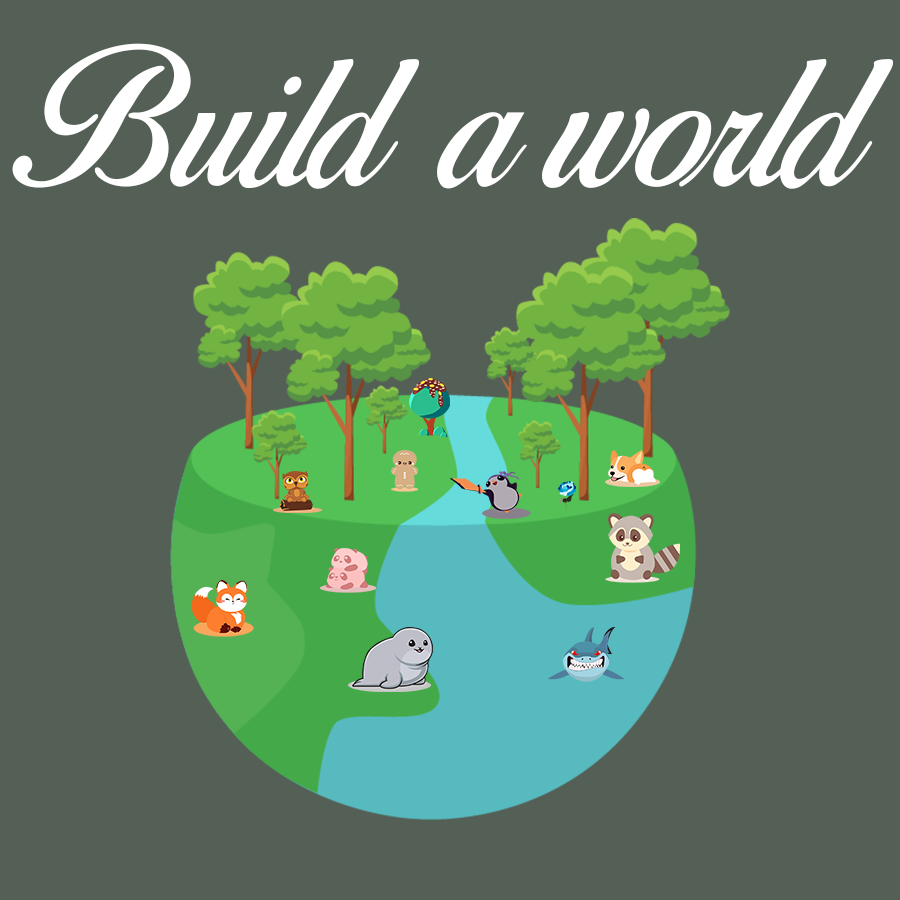
<style>
.page{position:relative;width:900px;height:900px;background:#545f56}
.page>*{position:absolute;margin:0}
.t1{font:169.3px "BirdsofParadise-PersonaluseOnly";color:#ffffff}
</style>
<div class="page">
<p class="t1" style="left:12px;top:43px;width:881px;height:146px">Build a world</p>
</div>
